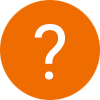
<style>
.page{position:relative;width:100px;height:100px;background:#ef6c00}
.page>*{position:absolute;margin:0}
.t1{font:76.3px "Roboto-Regular";color:#ffffff}
</style>
<div class="page">
<p class="t1" style="left:34px;top:24px;width:31px;height:56px">?</p>
</div>
